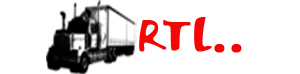
<style>
.page{position:relative;width:300px;height:74px;background:#ffffff}
.page>*{position:absolute;margin:0}
.t1{font:45.8px "AirstreamITCTT";color:#f40606;text-transform:uppercase;font-weight:bold}
</style>
<div class="page">
<p class="t1" style="left:139px;top:17px;width:103px;height:36px">rtl..</p>
</div>
